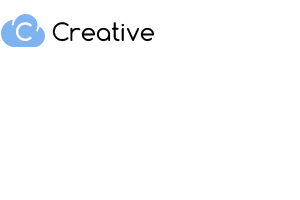
<style>
.page{position:relative;width:300px;height:200px;background:#ffffff}
.page>*{position:absolute;margin:0}
.t1{font:24px "Comfortaa-Regular";color:#010101}
.t2{font:24px "Comfortaa-Bold";color:#fbfbfb}
</style>
<div class="page">
<p class="t1" style="left:16px;top:22px;width:139px;height:20px"><span class="t2">C   </span>Creative</p>
</div>
